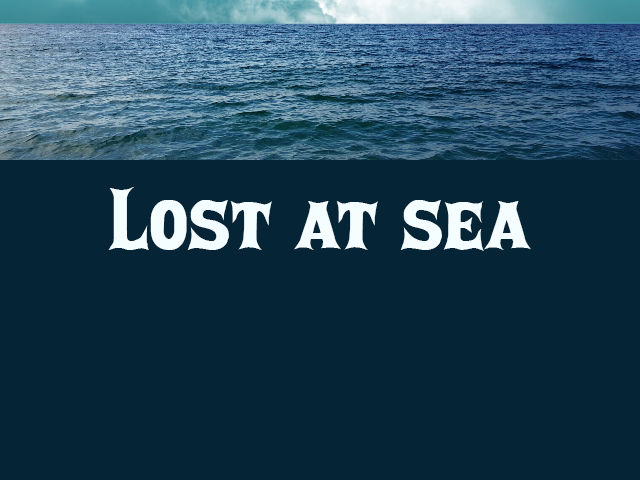
<style>
.page{position:relative;width:640px;height:480px;background:#052536}
.page>*{position:absolute;margin:0}
.t1{font:83.3px "P22Posada-Regular";color:#f4fdff;scale:1.05 1}
</style>
<div class="page">
<p class="t1" style="left:108px;top:187px;width:423px;height:64px">Lost at sea</p>
</div>
